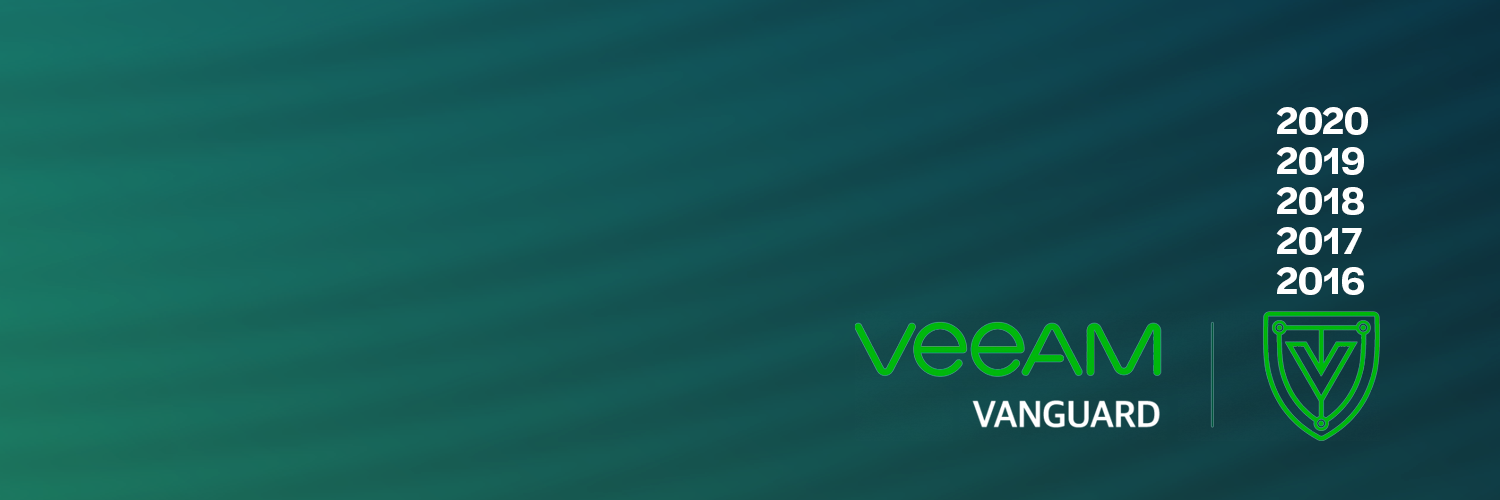
<style>
.page{position:relative;width:1500px;height:500px}
.page>*{position:absolute;margin:0}
.t1{font:39.2px "HalyardDisplaySemiBold";color:#ffffff}
</style>
<div class="page">
<p class="t1" style="left:1276px;top:107px;width:92px;height:28px">2020</p>
<p class="t1" style="left:1276px;top:147px;width:88px;height:28px">2019</p>
<p class="t1" style="left:1276px;top:187px;width:88px;height:28px">2018</p>
<p class="t1" style="left:1276px;top:227px;width:86px;height:28px">2017</p>
<p class="t1" style="left:1276px;top:267px;width:88px;height:28px">2016</p>
</div>
